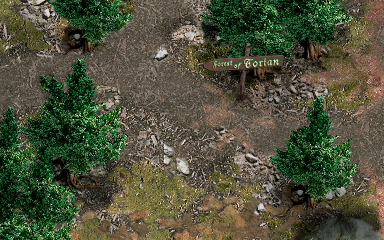
<style>
.page{position:relative;width:384px;height:240px}
.page>*{position:absolute;margin:0}
.t1{font:7.6px "DucDeBerry";letter-spacing:0.08em;color:#bac290;font-style:italic;scale:0.92 1}
.t2{font:7px "DucDeBerry";letter-spacing:0.08em;color:#cfdca7;font-style:italic}
.t3{font:11px "DucDeBerry";letter-spacing:0.08em;font-style:italic;scale:1.06 1}
</style>
<div class="page">
<p class="t1" style="left:213px;top:60px;width:20px;height:9px;rotate:-4deg">Forest</p>
<p class="t2" style="left:234px;top:62px;width:8px;height:8px">of</p>
<p class="t3" style="left:244px;top:58px;width:35px;height:10px;rotate:-5deg">Torian</p>
</div>
